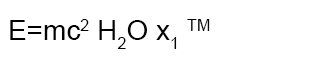
<style>
.page{position:relative;width:320px;height:64px;background:#ffffff}
.page>*{position:absolute;margin:0}
.t1{font:28px "ArialMT";color:#000000}
</style>
<div class="page">
<p class="t1" style="left:10px;top:19px;width:200px;height:30px">E=mc2 H2O x1 TM</p>
</div>
